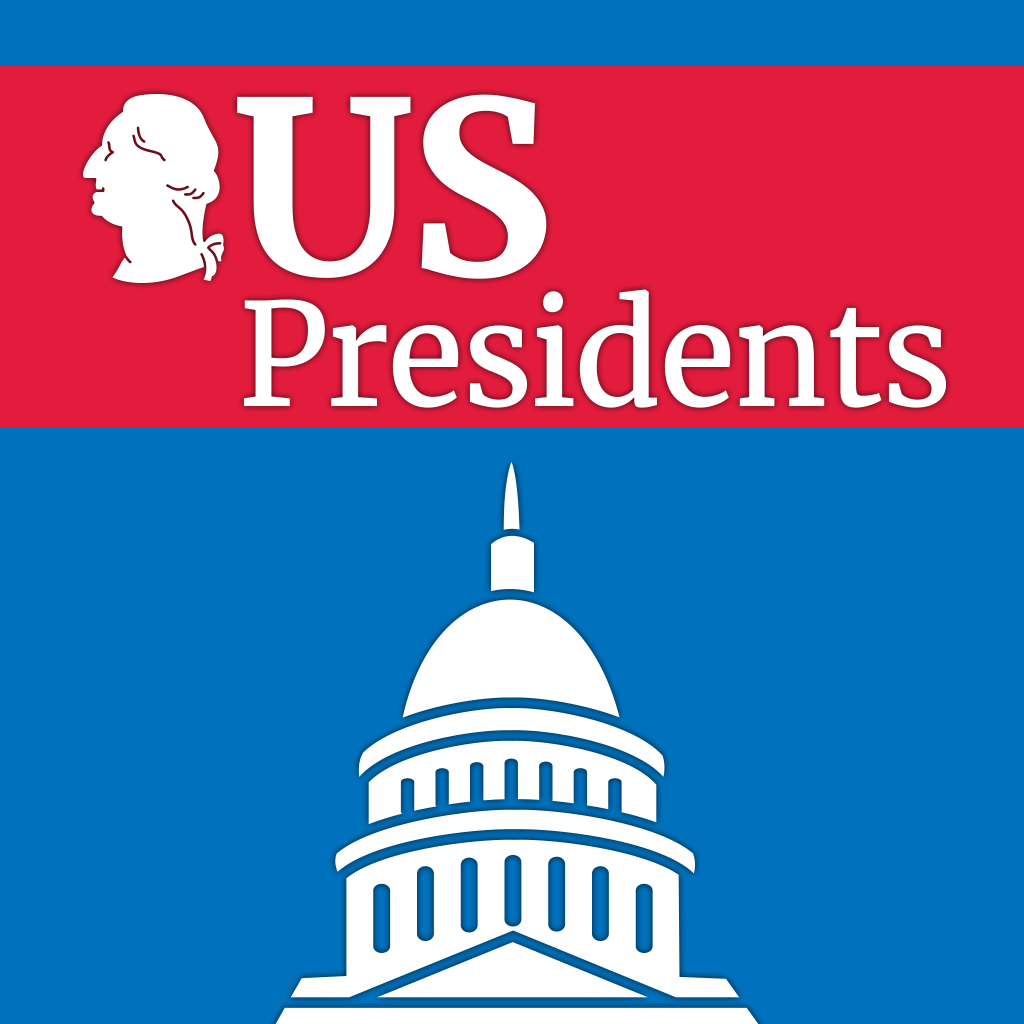
<style>
.page{position:relative;width:1024px;height:1024px;background:#0071bc}
.page>*{position:absolute;margin:0}
.t1{font:240.7px "Merriweather-Bold";letter-spacing:-0.025em;color:#ffffff}
.t2{font:142.4px "Merriweather";letter-spacing:-0.025em;color:#ffffff}
</style>
<div class="page">
<p class="t1" style="left:237px;top:94px;width:310px;height:185px">US</p>
<p class="t2" style="left:243px;top:289px;width:704px;height:119px">Presidents</p>
</div>
